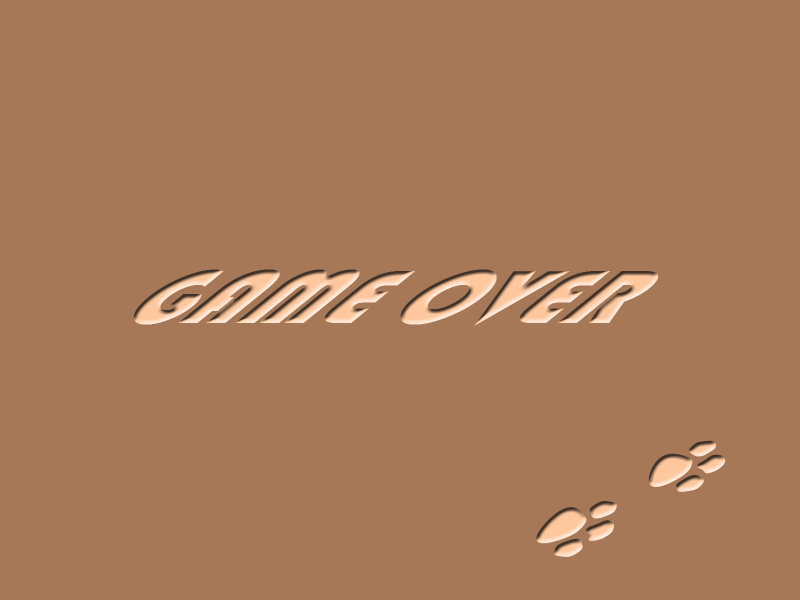
<style>
.page{position:relative;width:800px;height:600px;background:#a67857}
.page>*{position:absolute;margin:0}
.t1{font:123px "Bauhaus93";scale:0.79 1}
</style>
<div class="page">
<p class="t1" style="left:133px;top:269px;width:526px;height:57px">GAME OVER</p>
</div>
